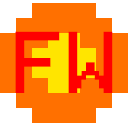
<style>
.page{position:relative;width:128px;height:128px;background:#ff7000}
.page>*{position:absolute;margin:0}
.t1{font:70px "Terminal";color:#ff0000}
</style>
<div class="page">
<p class="t1" style="left:15px;top:31px;width:98px;height:62px">FW</p>
</div>
